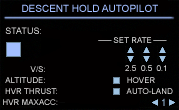
<style>
.page{position:relative;width:179px;height:110px;background:#020000}
.page>*{position:absolute;margin:0}
.t1{font:10px "ArialMT";color:#a2beff;font-variant:small-caps}
.t2{font:9px "ArialMT";font-variant:small-caps}
.t3{font:8px "ArialMT";font-variant:small-caps}
.t4{font:8px "ArialMT";color:#e6e5e5;font-variant:small-caps}
.t5{font:8px "ArialMT";color:#e9e9e9;font-variant:small-caps}
.t6{font:8px "ArialMT";color:#cacaca;font-variant:small-caps}
.t7{font:10px "ArialMT";font-variant:small-caps}
</style>
<div class="page">
<p class="t1" style="left:22px;top:4px;width:136px;height:8px">DESCENT HOLD AUTOPILOT</p>
<p class="t2" style="left:5px;top:27px;width:36px;height:7px">STATUS:</p>
<p class="t3" style="left:5px;top:77px;width:40px;height:6px">ALTITUDE:</p>
<p class="t3" style="left:30px;top:66px;width:15px;height:6px">V/S:</p>
<p class="t4" style="left:5px;top:88px;width:52px;height:6px">HVR THRUST:</p>
<p class="t5" style="left:3px;top:99px;width:55px;height:6px">HVR MAXAC<span class="t6">C:</span></p>
<p class="t7" style="left:162px;top:98px;width:3px;height:8px">1</p>
</div>
